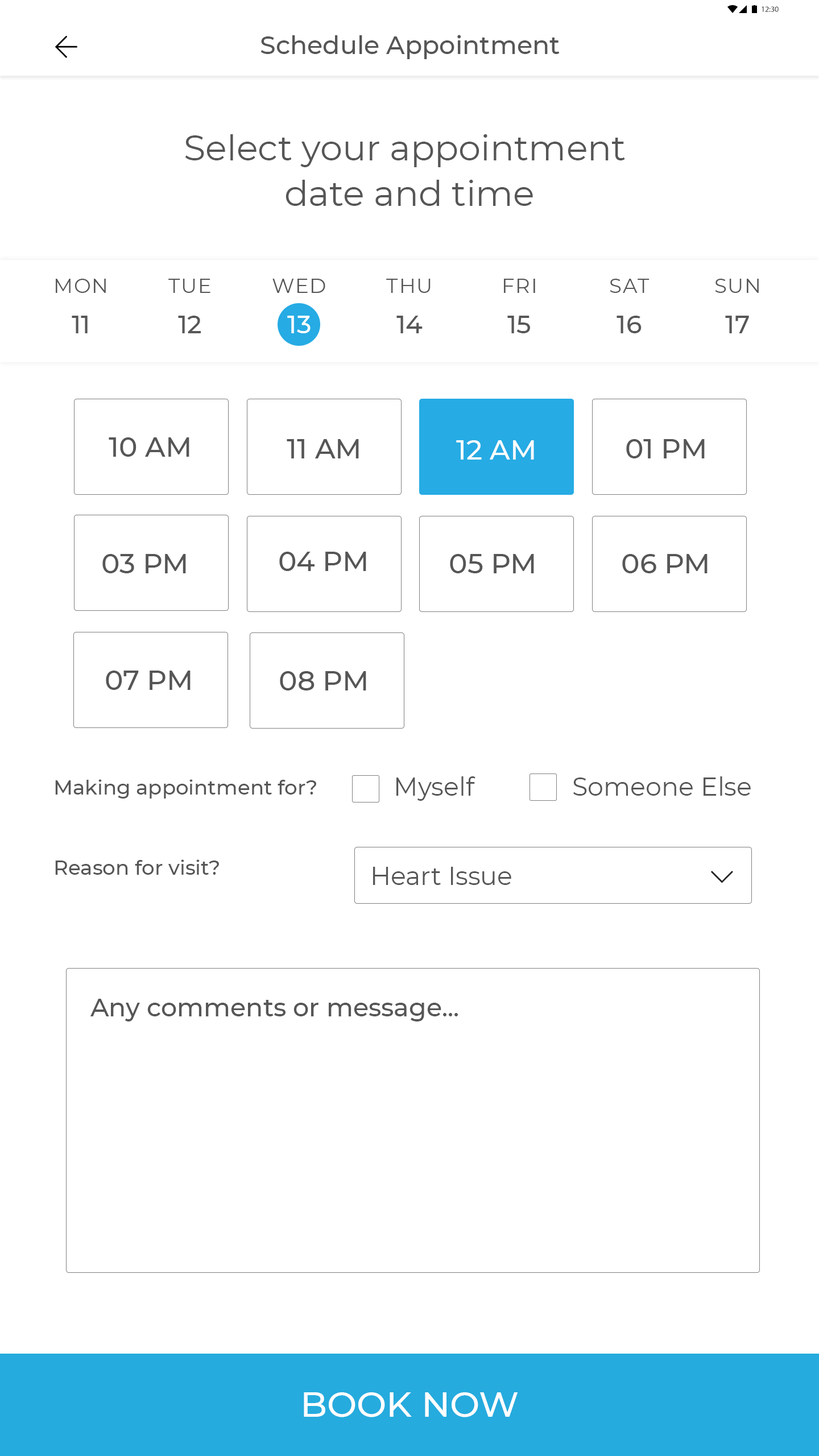
<style>
.page{position:relative;width:819px;height:1456px;background:#ffffff}
.page>*{position:absolute;margin:0}
.t1{font:8px "MyriadPro-Regular";color:#191919}
.t2{font:25.3px "Montserrat-Medium";color:#565656}
.t3{font:35.4px/45.5px "Montserrat-Regular";color:#565656}
.t4{font:20.2px/40.4px "Montserrat-Regular";letter-spacing:0.05em;color:#575757;text-transform:uppercase}
.t5{font:25.3px/40.4px "Montserrat-Medium";color:#575757;text-transform:uppercase}
.t6{font:20.2px/40.4px "Montserrat-Regular";letter-spacing:0.05em;color:#565656;text-transform:uppercase}
.t7{font:25.3px/40.4px "Montserrat-Medium";color:#ffffff;text-transform:uppercase}
.t8{font:27.8px "Montserrat-Medium";color:#565656}
.t9{font:27.8px "Montserrat-Medium";color:#fffdfd}
.t10{font:20.2px "Montserrat-Medium";color:#565656}
.t11{font:25.3px "Montserrat-Regular";color:#565656}
.t12{font:35.4px "Montserrat-Medium";color:#ffffff}
</style>
<div class="page">
<p class="t1" style="left:762px;top:6px;width:17px;height:6px">12:30</p>
<p class="t2" style="left:260px;top:35px;width:300px;height:24px">Schedule Appointment</p>
<p class="t3" style="left:185px;top:134px;width:440px;height:72px;text-align:center">Select your appointment <br>date and time</p>
<p class="t4" style="left:56px;top:279px;width:50px;height:54px;text-align:center">Mon<br><span class="t5">11</span></p>
<p class="t4" style="left:168px;top:279px;width:42px;height:54px;text-align:center">TUE<br><span class="t5">12</span></p>
<p class="t6" style="left:272px;top:279px;width:53px;height:54px;text-align:center">WED<br><span class="t7">13</span></p>
<p class="t4" style="left:386px;top:279px;width:45px;height:54px;text-align:center">THU<br><span class="t5">14</span></p>
<p class="t4" style="left:504px;top:279px;width:31px;height:54px;text-align:center">FRI<br><span class="t5">15</span></p>
<p class="t4" style="left:610px;top:279px;width:40px;height:54px;text-align:center">SAT<br><span class="t5">16</span></p>
<p class="t4" style="left:715px;top:279px;width:44px;height:54px;text-align:center">SUN<br><span class="t5">17</span></p>
<p class="t8" style="left:109px;top:437px;width:80px;height:20px">10 AM</p>
<p class="t8" style="left:287px;top:439px;width:72px;height:19px">11 AM</p>
<p class="t9" style="left:456px;top:440px;width:78px;height:20px">12 AM</p>
<p class="t8" style="left:626px;top:439px;width:79px;height:19px">01 PM</p>
<p class="t8" style="left:102px;top:554px;width:84px;height:19px">03 PM</p>
<p class="t8" style="left:279px;top:552px;width:87px;height:19px">04 PM</p>
<p class="t8" style="left:450px;top:554px;width:84px;height:19px">05 PM</p>
<p class="t8" style="left:622px;top:554px;width:86px;height:19px">06 PM</p>
<p class="t8" style="left:106px;top:671px;width:85px;height:19px">07 PM</p>
<p class="t8" style="left:280px;top:671px;width:86px;height:19px">08 PM</p>
<p class="t10" style="left:55px;top:779px;width:261px;height:20px">Making appointment for?</p>
<p class="t11" style="left:396px;top:776px;width:79px;height:25px">Myself</p>
<p class="t11" style="left:573px;top:776px;width:178px;height:20px">Someone Else</p>
<p class="t10" style="left:55px;top:859px;width:164px;height:16px">Reason for visit?</p>
<p class="t11" style="left:373px;top:867px;width:138px;height:18px">Heart Issue</p>
<p class="t2" style="left:90px;top:999px;width:368px;height:22px">Any comments or message...</p>
<p class="t12" style="left:304px;top:1392px;width:214px;height:25px">BOOK NOW</p>
</div>
